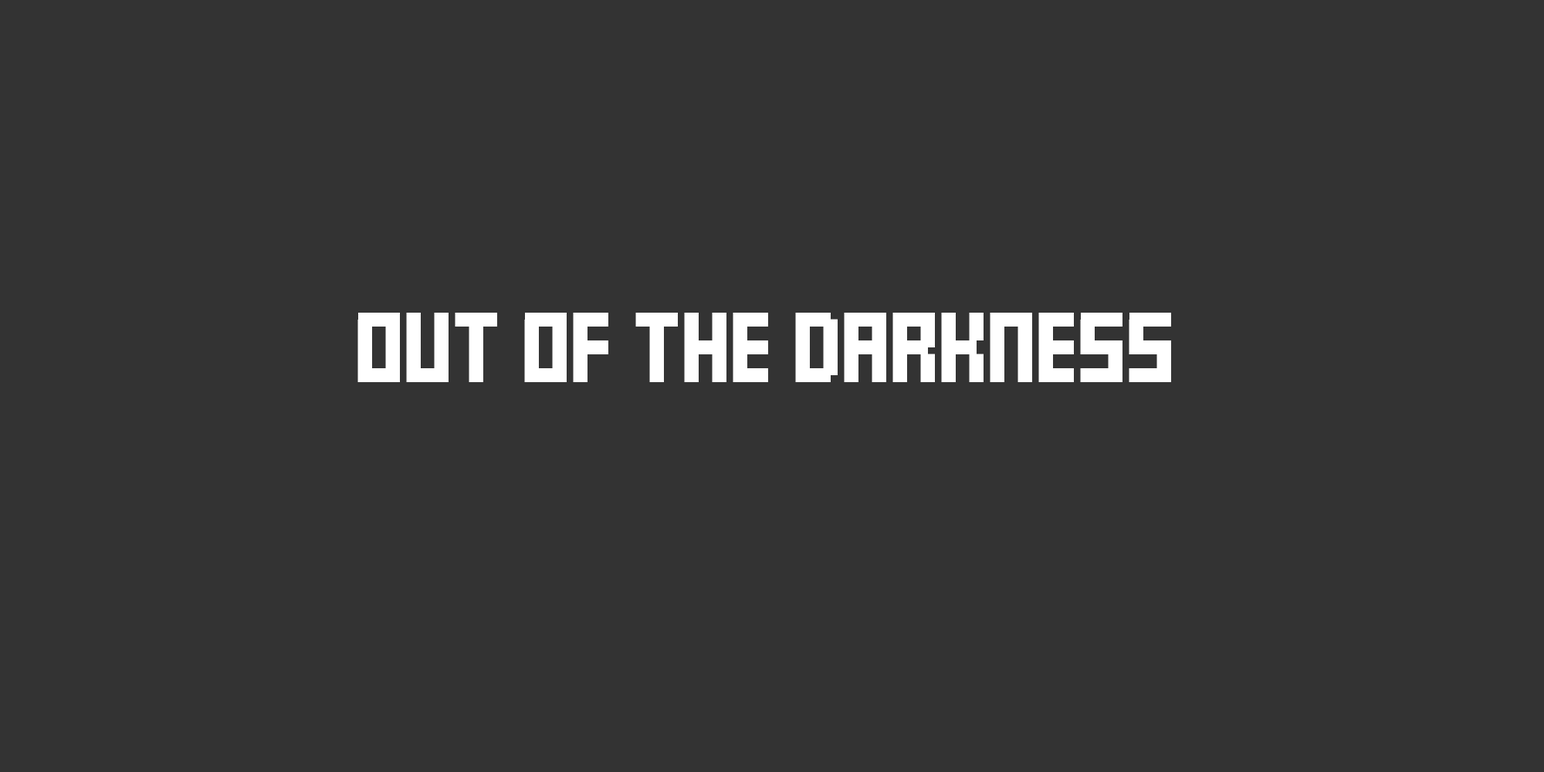
<style>
.page{position:relative;width:1544px;height:772px;background:#333333}
.page>*{position:absolute;margin:0}
.t1{font:55.6px "FFFForward";color:#ffffff}
</style>
<div class="page">
<p class="t1" style="left:358px;top:313px;width:813px;height:69px">OUT OF THE DARKNESS</p>
</div>
